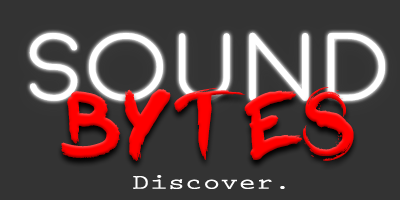
<style>
.page{position:relative;width:400px;height:200px;background:#333333}
.page>*{position:absolute;margin:0}
.t1{font:96.4px "Moon-Light";color:#ffffff;scale:1.09 1}
.t2{font:92.1px "Brocha-Regular";color:#ff0000;scale:1.14 1}
.t3{font:21.2px "PrestigeEliteStd-Bd";color:#ffffff;scale:1.39 1}
</style>
<div class="page">
<p class="t1" style="left:29px;top:32px;width:356px;height:69px">Sound</p>
<p class="t2" style="left:61px;top:87px;width:293px;height:74px">bytes</p>
<p class="t3" style="left:133px;top:175px;width:152px;height:15px">Discover.</p>
</div>
